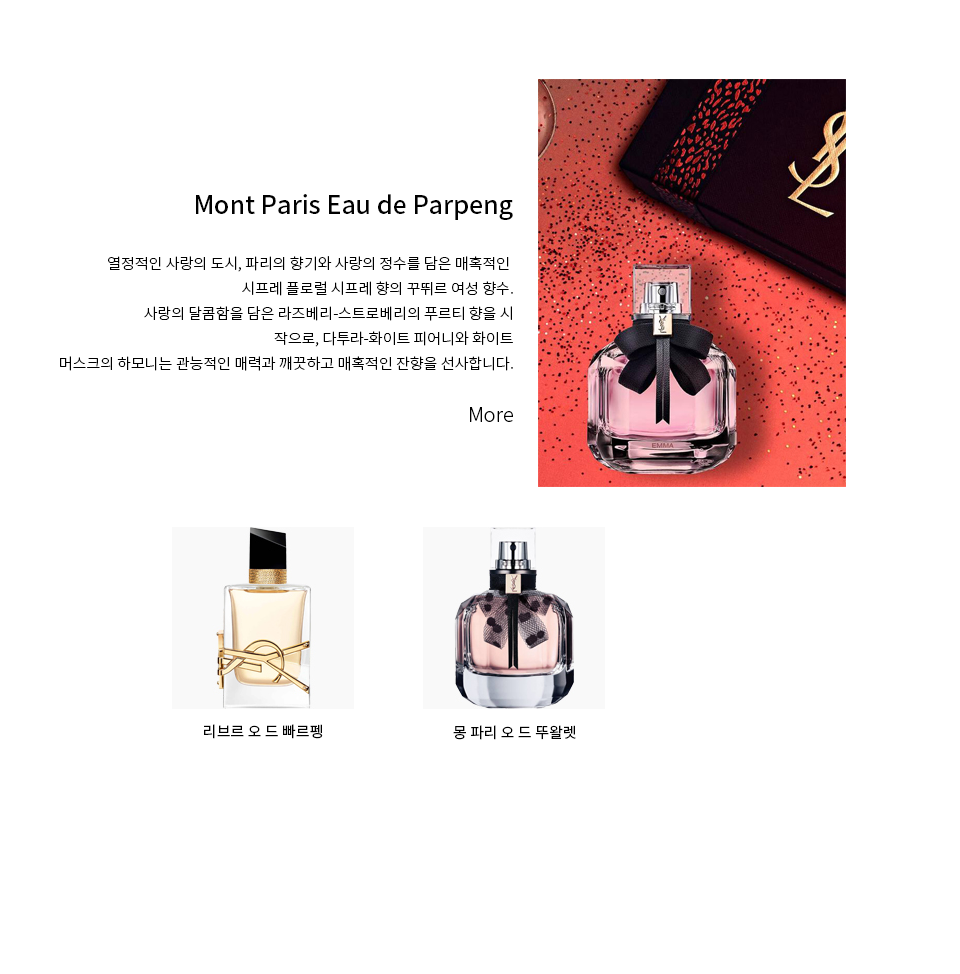
<style>
.page{position:relative;width:960px;height:974px;background:#ffffff}
.page>*{position:absolute;margin:0}
.t1{font:25px "NotoSansKR-Medium";color:#000000}
.t2{font:15px/25px "NotoSansKR-Light";color:#000000}
.t3{font:20px "NotoSansKR-Light";color:#000000}
.t4{font:15px "NotoSansKR-Regular";color:#000000}
</style>
<div class="page">
<p class="t1" style="left:196px;top:194px;width:317px;height:26px">Mont Paris Eau de Parpeng</p>
<p class="t2" style="left:60px;top:256px;width:453px;height:115px;text-align:right">열정적인 사랑의 도시, 파리의 향기와 사랑의 정수를 담은 매혹적인 <br>시프레 플로럴 시프레 향의 꾸뛰르 여성 향수.<br>사랑의 달콤함을 담은 라즈베리-스트로베리의 푸르티 향을 시<br>작으로, 다투라-화이트 피어니와 화이트<br> 머스크의 하모니는 관능적인 매력과 깨끗하고 매혹적인 잔향을 선사합니다.</p>
<p class="t3" style="left:470px;top:407px;width:43px;height:15px">More</p>
<p class="t4" style="left:204px;top:724px;width:119px;height:15px">리브르 오 드 빠르펭</p>
<p class="t4" style="left:453px;top:725px;width:123px;height:15px">몽 파리 오 드 뚜왈렛</p>
</div>
